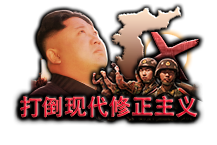
<style>
.page{position:relative;width:217px;height:145px;background:#ffffff}
.page>*{position:absolute;margin:0}
.t1{font:22.3px "AdobeHeitiStd-Regular"}
</style>
<div class="page">
<p class="t1" style="left:20px;top:96px;width:177px;height:21px">打倒现代修正主义</p>
</div>
